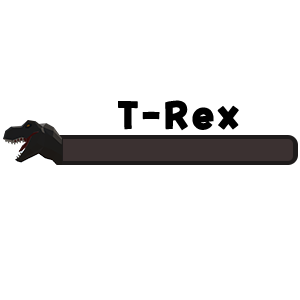
<style>
.page{position:relative;width:300px;height:300px;background:#ffffff}
.page>*{position:absolute;margin:0}
.t1{font:45px "KoreanERIN-M";letter-spacing:0.05em;color:#000000;font-weight:bold}
</style>
<div class="page">
<p class="t1" style="left:118px;top:100px;width:121px;height:31px">T-Rex</p>
</div>
